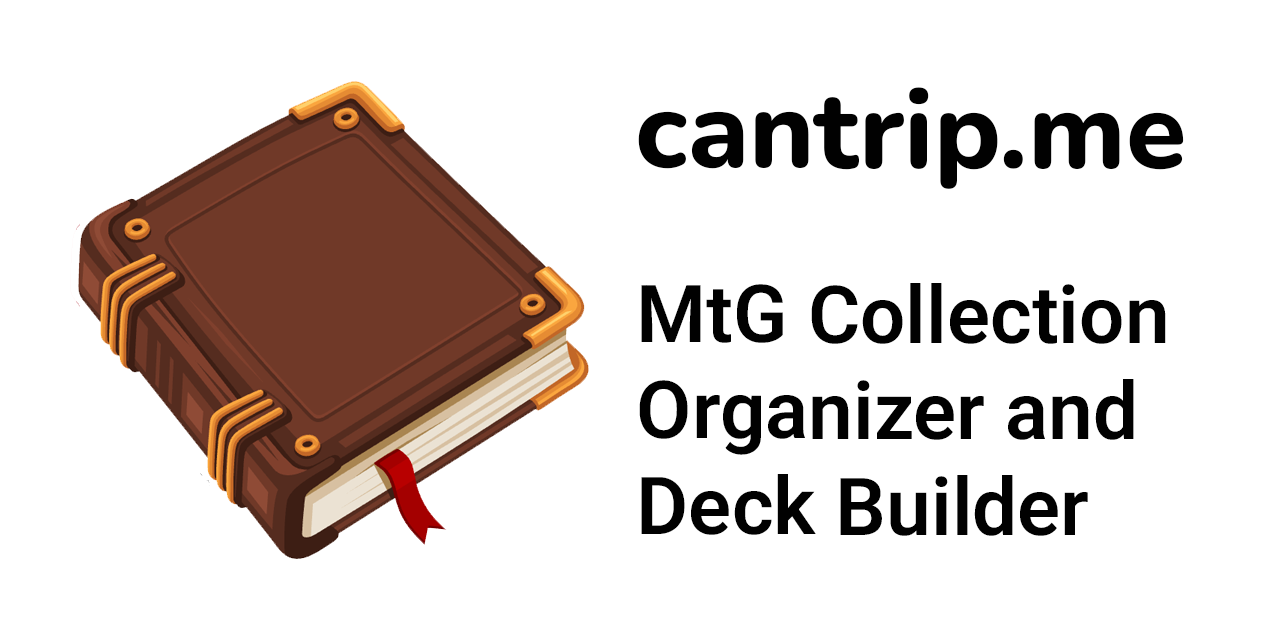
<style>
.page{position:relative;width:1280px;height:640px;background:#ffffff}
.page>*{position:absolute;margin:0}
.t1{font:110px "Nunito-ExtraBold";color:#010101}
.t2{font:80px "Roboto-SemiBold";color:#010101}
</style>
<div class="page">
<p class="t1" style="left:638px;top:87px;width:546px;height:102px">cantrip.me</p>
<p class="t2" style="left:639px;top:283px;width:527px;height:253px">MtG Collection<br>Organizer and<br>Deck Builder</p>
</div>
